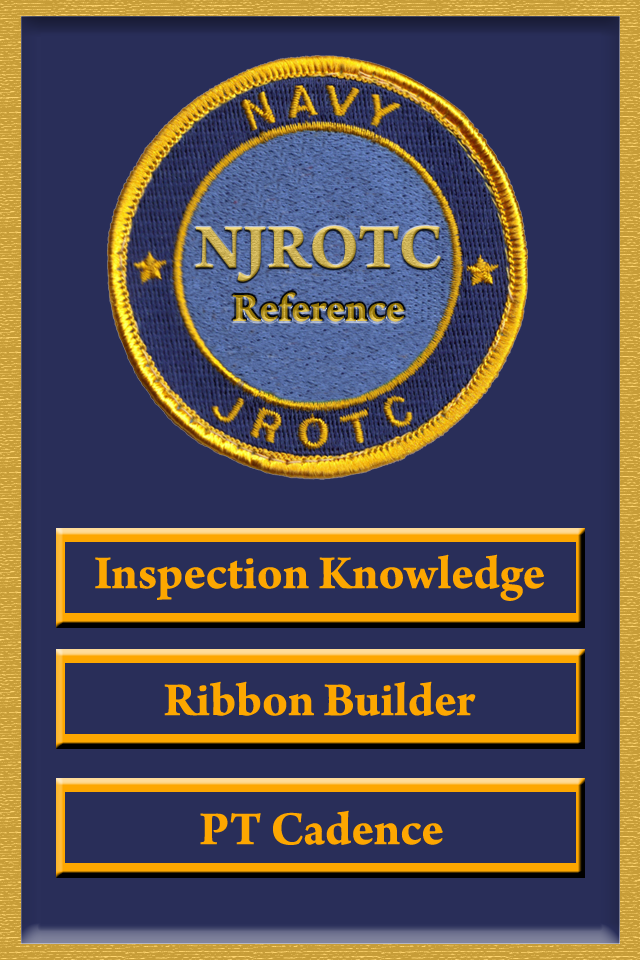
<style>
.page{position:relative;width:640px;height:960px;background:#292e59}
.page>*{position:absolute;margin:0}
.t1{font:66px "ArnoPro-Bold"}
.t2{font:42.7px "ArnoPro-Bold"}
.t3{font:50px "ArnoPro-Bold";color:#fda700}
</style>
<div class="page">
<p class="t1" style="left:195px;top:226px;width:246px;height:56px">NJROTC</p>
<p class="t2" style="left:232px;top:292px;width:172px;height:30px">Reference</p>
<p class="t3" style="left:95px;top:554px;width:449px;height:47px">Inspection Knowledge</p>
<p class="t3" style="left:164px;top:681px;width:312px;height:35px">Ribbon Builder</p>
<p class="t3" style="left:200px;top:810px;width:243px;height:35px">PT Cadence</p>
</div>
